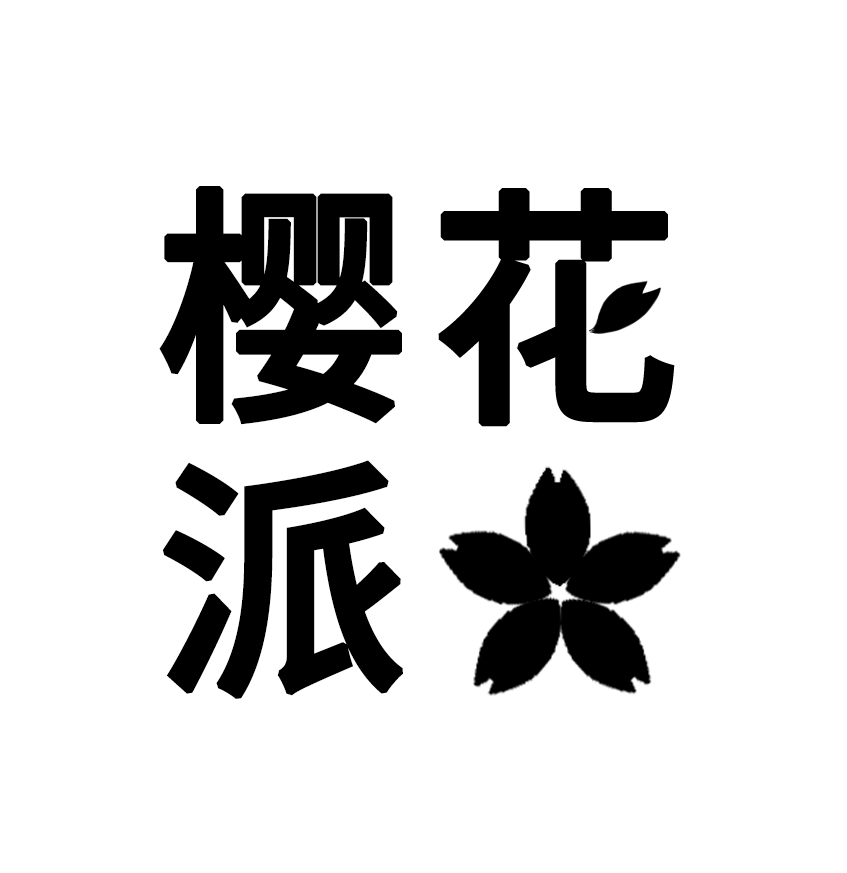
<style>
.page{position:relative;width:847px;height:873px;background:#ffffff}
.page>*{position:absolute;margin:0}
.t1{font:252px "NotoSansCJKsc-Medium";letter-spacing:0.01em;color:#000000;font-weight:bold}
</style>
<div class="page">
<p class="t1" style="left:159px;top:186px;width:243px;height:239px">樱</p>
<p class="t1" style="left:162px;top:460px;width:241px;height:239px">派</p>
</div>
